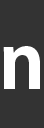
<style>
.page{position:relative;width:44px;height:128px;background:#333333}
.page>*{position:absolute;margin:0}
.t1{font:75px "AdobeGothicStd-Bold";color:#ffffff}
</style>
<div class="page">
<p class="t1" style="left:3px;top:46px;width:37px;height:43px">n</p>
</div>
